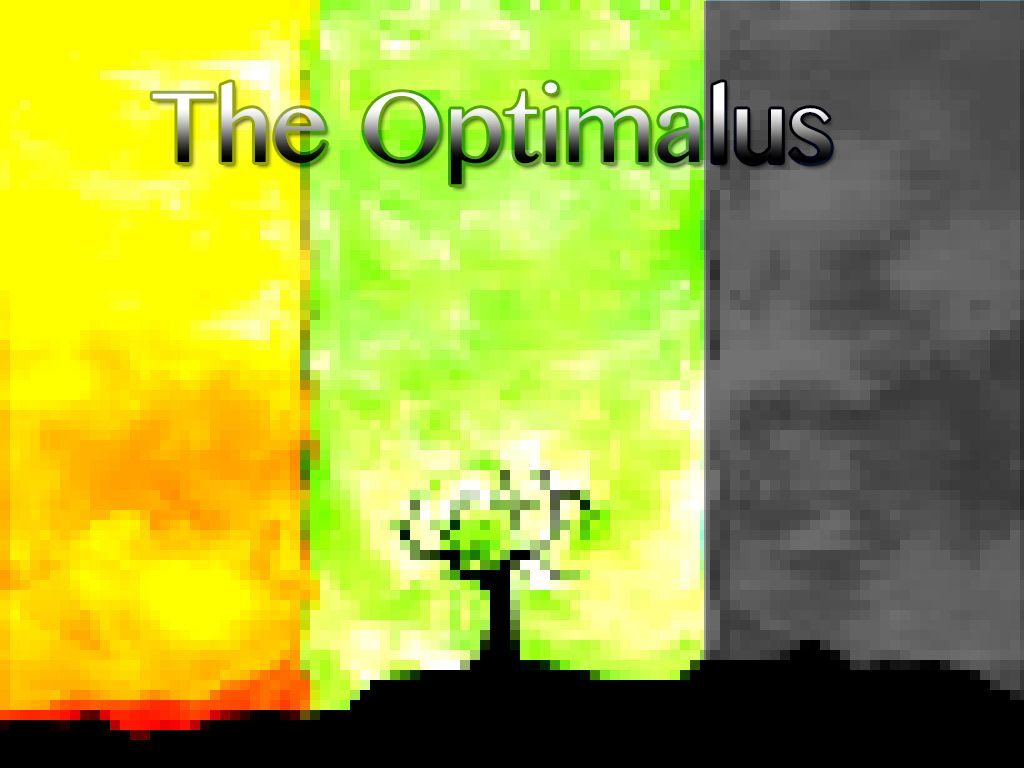
<style>
.page{position:relative;width:1024px;height:768px}
.page>*{position:absolute;margin:0}
.t1{font:100px "TamilMN"}
</style>
<div class="page">
<p class="t1" style="left:152px;top:82px;width:679px;height:103px">The Optimalus</p>
</div>
